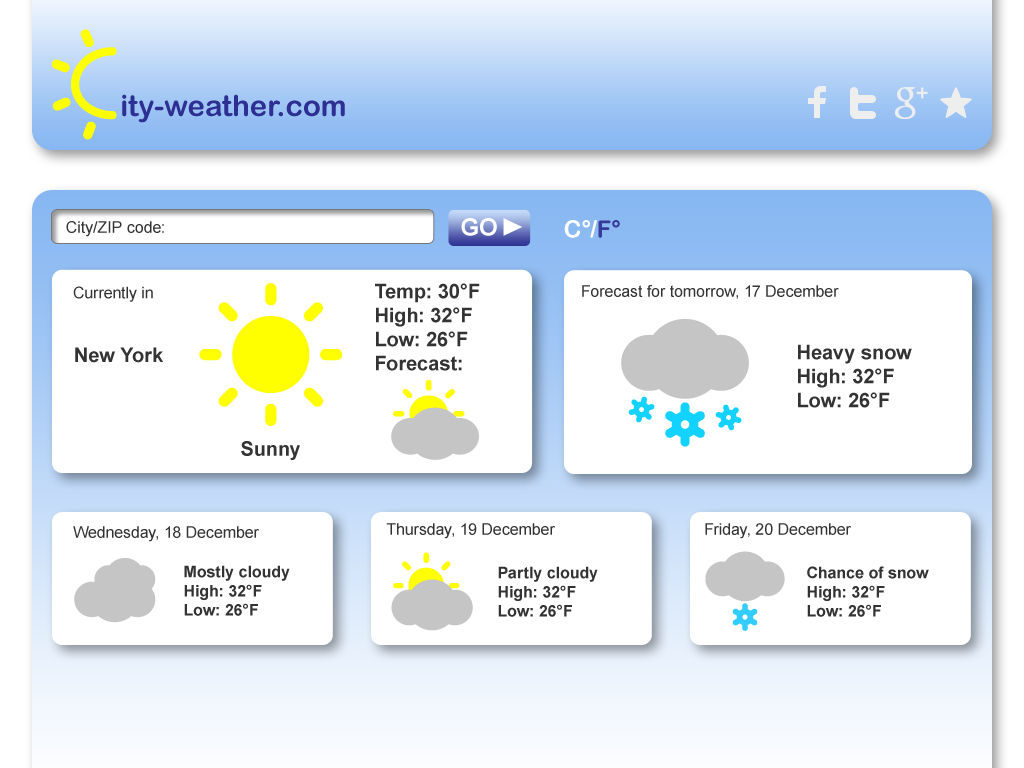
<style>
.page{position:relative;width:1024px;height:768px;background:#ffffff}
.page>*{position:absolute;margin:0}
.t1{font:16px "ArialMT";color:#333333}
.t2{font:24px "Arial-BoldMT";color:#ffffff}
.t3{font:24px "ArialRoundedMTBold";color:#ffffff}
.t4{font:24px "ArialRoundedMTBold";color:#363a98}
.t5{font:20px "Arial-BoldMT";color:#333333}
.t6{font:16px "Arial-BoldMT";color:#333333}
</style>
<div class="page">
<p class="t1" style="left:66px;top:221px;width:98px;height:16px">City/ZIP code:</p>
<p class="t2" style="left:461px;top:218px;width:36px;height:18px">GO</p>
<p class="t3" style="left:564px;top:220px;width:56px;height:18px">C°/<span class="t4">F°</span></p>
<p class="t1" style="left:73px;top:286px;width:80px;height:16px">Currently in</p>
<p class="t5" style="left:375px;top:283px;width:105px;height:88px">Temp: 30°F<br>High: 32°F<br>Low: 26°F<br>Forecast:</p>
<p class="t1" style="left:582px;top:285px;width:257px;height:14px">Forecast for tomorrow, 17 December</p>
<p class="t5" style="left:75px;top:347px;width:88px;height:16px">New York</p>
<p class="t5" style="left:798px;top:344px;width:114px;height:64px">Heavy snow<br>High: 32°F<br>Low: 26°F</p>
<p class="t5" style="left:241px;top:441px;width:59px;height:19px">Sunny</p>
<p class="t1" style="left:73px;top:526px;width:186px;height:16px">Wednesday, 18 December</p>
<p class="t1" style="left:386px;top:523px;width:169px;height:16px">Thursday, 19 December</p>
<p class="t1" style="left:705px;top:523px;width:146px;height:16px">Friday, 20 December</p>
<p class="t6" style="left:184px;top:565px;width:106px;height:51px">Mostly cloudy<br>High: 32°F<br>Low: 26°F</p>
<p class="t6" style="left:498px;top:566px;width:100px;height:51px">Partly cloudy<br>High: 32°F<br>Low: 26°F</p>
<p class="t6" style="left:807px;top:566px;width:122px;height:51px">Chance of snow<br>High: 32°F<br>Low: 26°F</p>
</div>
